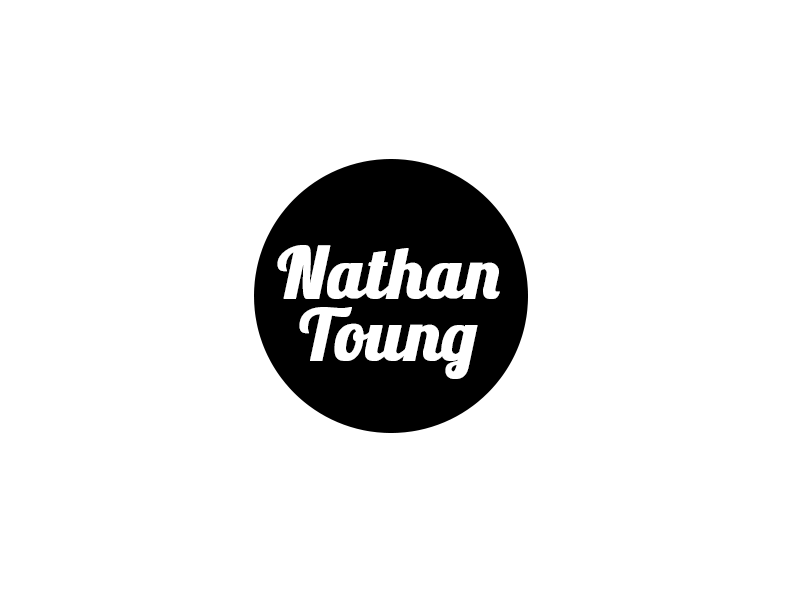
<style>
.page{position:relative;width:800px;height:600px;background:#ffffff}
.page>*{position:absolute;margin:0}
.t1{font:70.8px "Lobster1.3";color:#ffffff;font-weight:bold}
</style>
<div class="page">
<p class="t1" style="left:277px;top:245px;width:223px;height:54px">Nathan</p>
<p class="t1" style="left:299px;top:307px;width:179px;height:72px">Toung</p>
</div>
